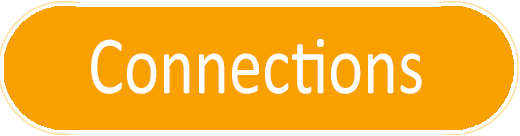
<style>
.page{position:relative;width:520px;height:136px;background:#f8a000}
.page>*{position:absolute;margin:0}
.t1{font:83.3px "Calibri";letter-spacing:0.001em;color:#ffffff;scale:0.8 1}
</style>
<div class="page">
<p class="t1" style="left:91px;top:39px;width:331px;height:55px">Connections</p>
</div>
